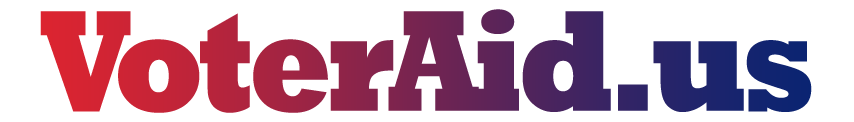
<style>
.page{position:relative;width:854px;height:122px;background:#ffffff}
.page>*{position:absolute;margin:0}
.t1{font:146.3px "Rockwell-ExtraBold";letter-spacing:-0.05em;scale:0.83 1}
</style>
<div class="page">
<p class="t1" style="left:40px;top:9px;width:772px;height:104px">VoterAid.us</p>
</div>
